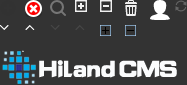
<style>
.page{position:relative;width:187px;height:85px;background:#333333}
.page>*{position:absolute;margin:0}
.t1{font:24px "HYk2gj";letter-spacing:-0.05em;color:#fbfcfd}
.t2{font:24px "HYk2gj";letter-spacing:0.1em;color:#fbfcfd}
</style>
<div class="page">
<p class="t1" style="left:39px;top:60px;width:138px;height:18px">Hilan<span class="t2">d</span>CMS</p>
</div>
